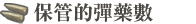
<style>
.page{position:relative;width:196px;height:24px;background:#ffffff}
.page>*{position:absolute;margin:0}
.t1{font:20px "RyuminPr6N-ExBold";color:#4b4742}
</style>
<div class="page">
<p class="t1" style="left:34px;top:2px;width:119px;height:20px">保管的彈藥數</p>
</div>
